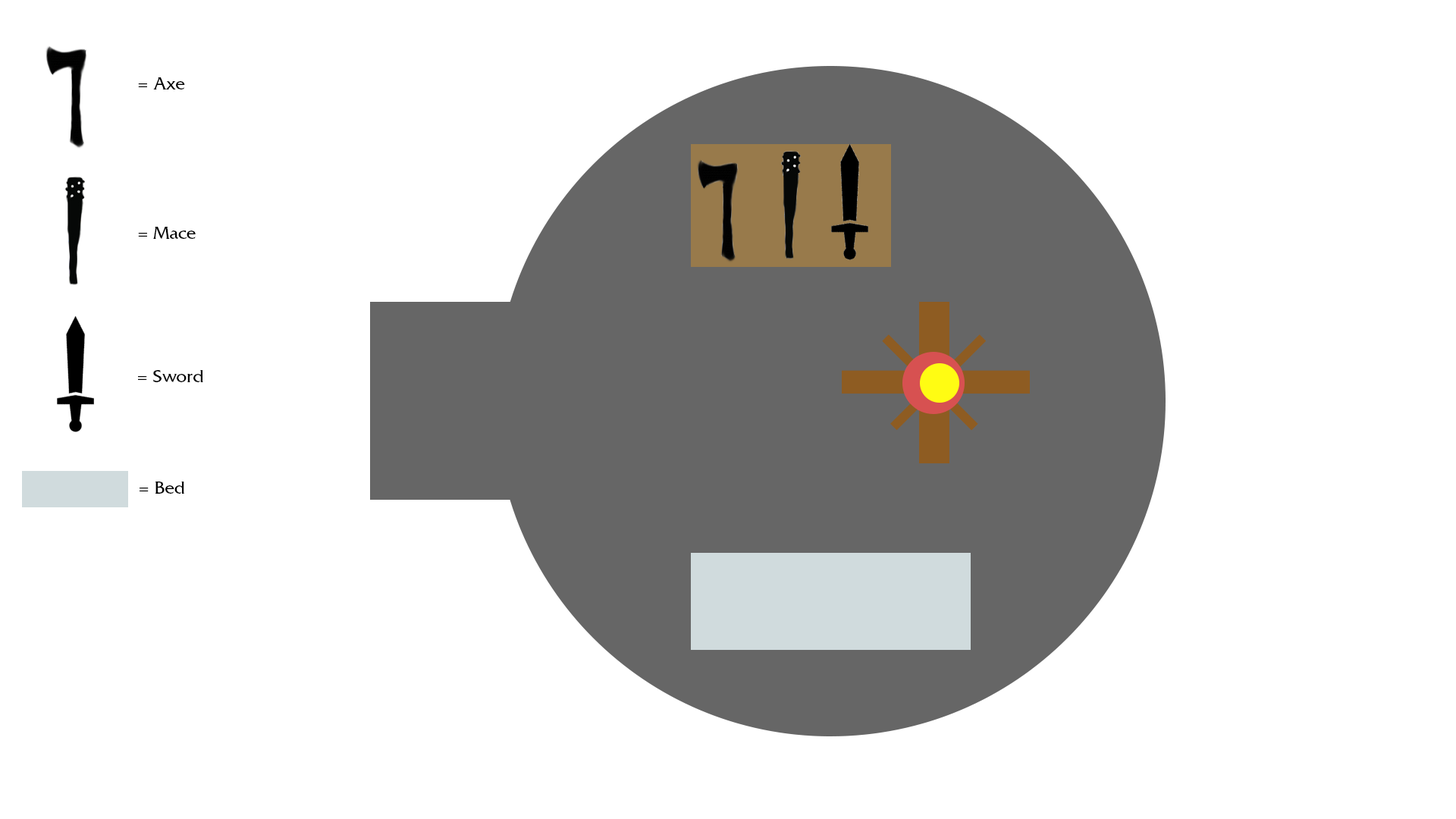
<style>
.page{position:relative;width:1456px;height:819px;background:#ffffff}
.page>*{position:absolute;margin:0}
.t1{font:18.2px "FrizQuadrataStd";color:#000000}
</style>
<div class="page">
<p class="t1" style="left:138px;top:77px;width:47px;height:12px">= Axe</p>
<p class="t1" style="left:138px;top:227px;width:58px;height:12px">= Mace</p>
<p class="t1" style="left:138px;top:370px;width:65px;height:12px">= Sword</p>
<p class="t1" style="left:140px;top:482px;width:45px;height:12px">= Bed</p>
</div>
